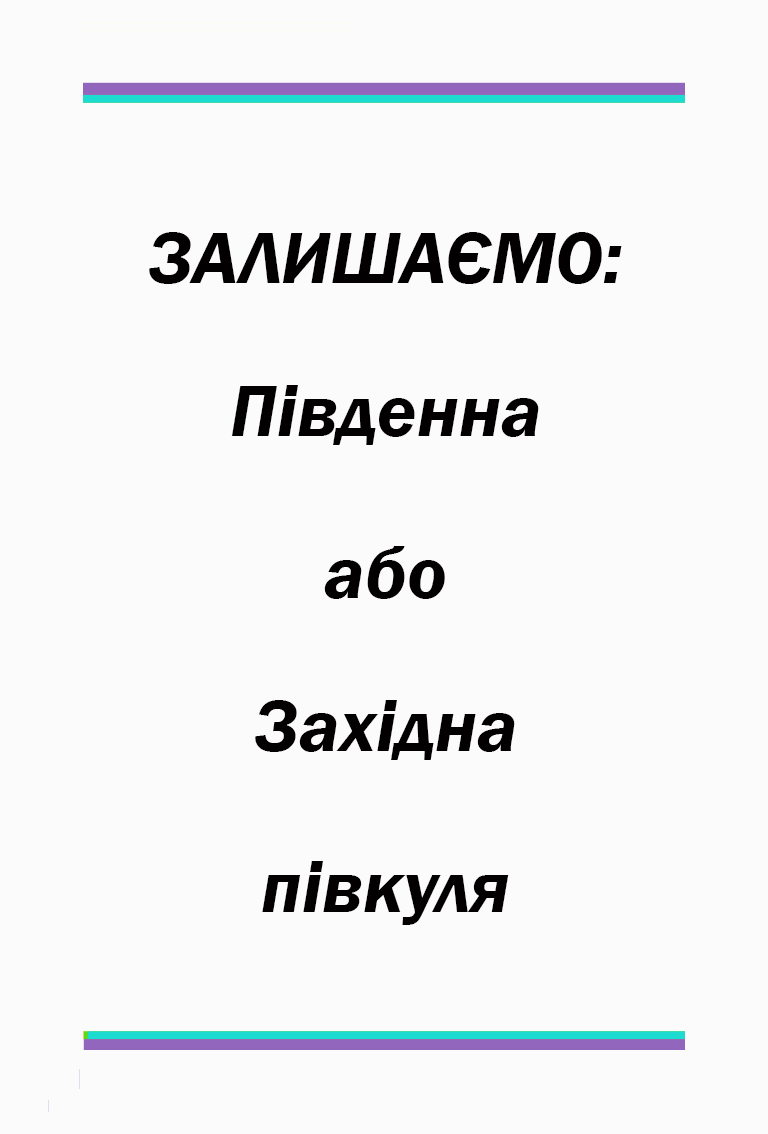
<style>
.page{position:relative;width:768px;height:1134px;background:#fbfbfb}
.page>*{position:absolute;margin:0}
.t1{font:75px "FranklinGothic-DemiItalic";color:#020000}
</style>
<div class="page">
<p class="t1" style="left:149px;top:232px;width:473px;height:52px">ЗАЛИШАЄМО:</p>
<p class="t1" style="left:231px;top:385px;width:308px;height:60px">Південна</p>
<p class="t1" style="left:324px;top:546px;width:121px;height:53px">або</p>
<p class="t1" style="left:255px;top:700px;width:260px;height:60px">Західна</p>
<p class="t1" style="left:262px;top:861px;width:247px;height:64px">півкуля</p>
</div>
